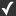
<style>
.page{position:relative;width:16px;height:16px;background:#333333}
.page>*{position:absolute;margin:0}
.t1{font:18px "LucidaGrande";color:#ffffff;font-weight:bold}
</style>
<div class="page">
<p class="t1" style="left:1px;top:1px;width:13px;height:15px">✓</p>
</div>
